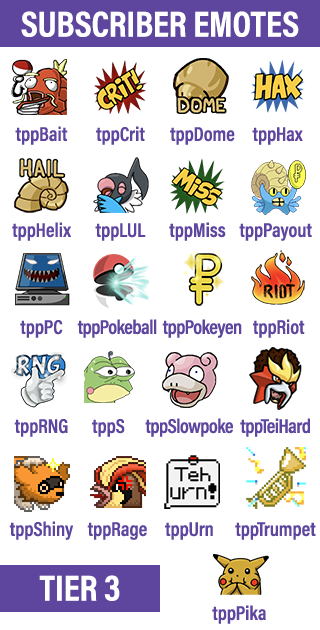
<style>
.page{position:relative;width:320px;height:630px;background:#ffffff}
.page>*{position:absolute;margin:0}
.t1{font:36.3px "AcuminProCond-Bold";color:#ffffff;text-transform:uppercase}
.t2{font:20px "AcuminProCond-Semibold";color:#5e469f}
.t3{font:20px "AcuminProCond-Semibold";letter-spacing:-0.025em;color:#5e469f}
</style>
<div class="page">
<p class="t1" style="left:21px;top:11px;width:278px;height:26px">Subscriber emotes</p>
<p class="t2" style="left:15px;top:126px;width:53px;height:19px">tppBait</p>
<p class="t2" style="left:96px;top:126px;width:49px;height:19px">tppCrit</p>
<p class="t2" style="left:170px;top:127px;width:65px;height:18px">tppDome</p>
<p class="t2" style="left:252px;top:127px;width:51px;height:18px">tppHax</p>
<p class="t2" style="left:12px;top:222px;width:59px;height:19px">tppHelix</p>
<p class="t2" style="left:169px;top:222px;width:57px;height:19px">tppMiss</p>
<p class="t2" style="left:95px;top:223px;width:51px;height:18px">tppLUL</p>
<p class="t2" style="left:239px;top:223px;width:73px;height:18px">tppPayout</p>
<p class="t2" style="left:20px;top:320px;width:43px;height:18px">tppPC</p>
<p class="t3" style="left:77px;top:319px;width:80px;height:19px">tppPokeball</p>
<p class="t3" style="left:162px;top:319px;width:80px;height:19px">tppPokeyen</p>
<p class="t2" style="left:253px;top:319px;width:52px;height:19px">tppRiot</p>
<p class="t2" style="left:14px;top:419px;width:54px;height:18px">tppRNG</p>
<p class="t2" style="left:92px;top:419px;width:33px;height:18px">tppS</p>
<p class="t3" style="left:145px;top:418px;width:88px;height:19px">tppSlowpoke</p>
<p class="t3" style="left:240px;top:418px;width:70px;height:19px">tppTeiHard</p>
<p class="t2" style="left:9px;top:521px;width:65px;height:19px">tppShiny</p>
<p class="t2" style="left:87px;top:522px;width:60px;height:18px">tppRage</p>
<p class="t2" style="left:165px;top:522px;width:48px;height:18px">tppUrn</p>
<p class="t2" style="left:235px;top:522px;width:81px;height:18px">tppTrumpet</p>
<p class="t1" style="left:39px;top:575px;width:81px;height:26px">Tier 3</p>
<p class="t2" style="left:212px;top:605px;width:54px;height:19px">tppPika</p>
</div>
